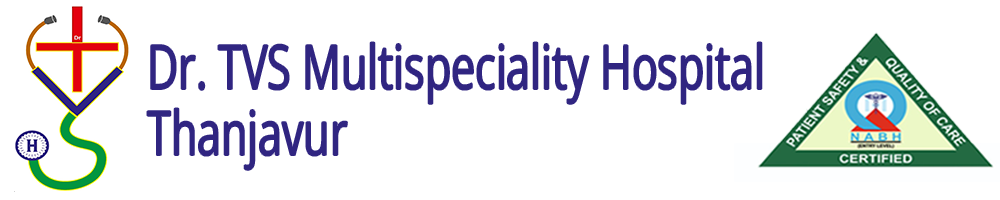
<style>
.page{position:relative;width:1000px;height:200px;background:#ffffff}
.page>*{position:absolute;margin:0}
.t1{font:61.2px/33px "OpenSans-Regular";color:#302581;scale:0.7 1}
</style>
<div class="page">
<p class="t1" style="left:147px;top:42px;width:615px;height:128px">Dr. TVS Multispeciality Hospital<br><br>Thanjavur</p>
</div>
